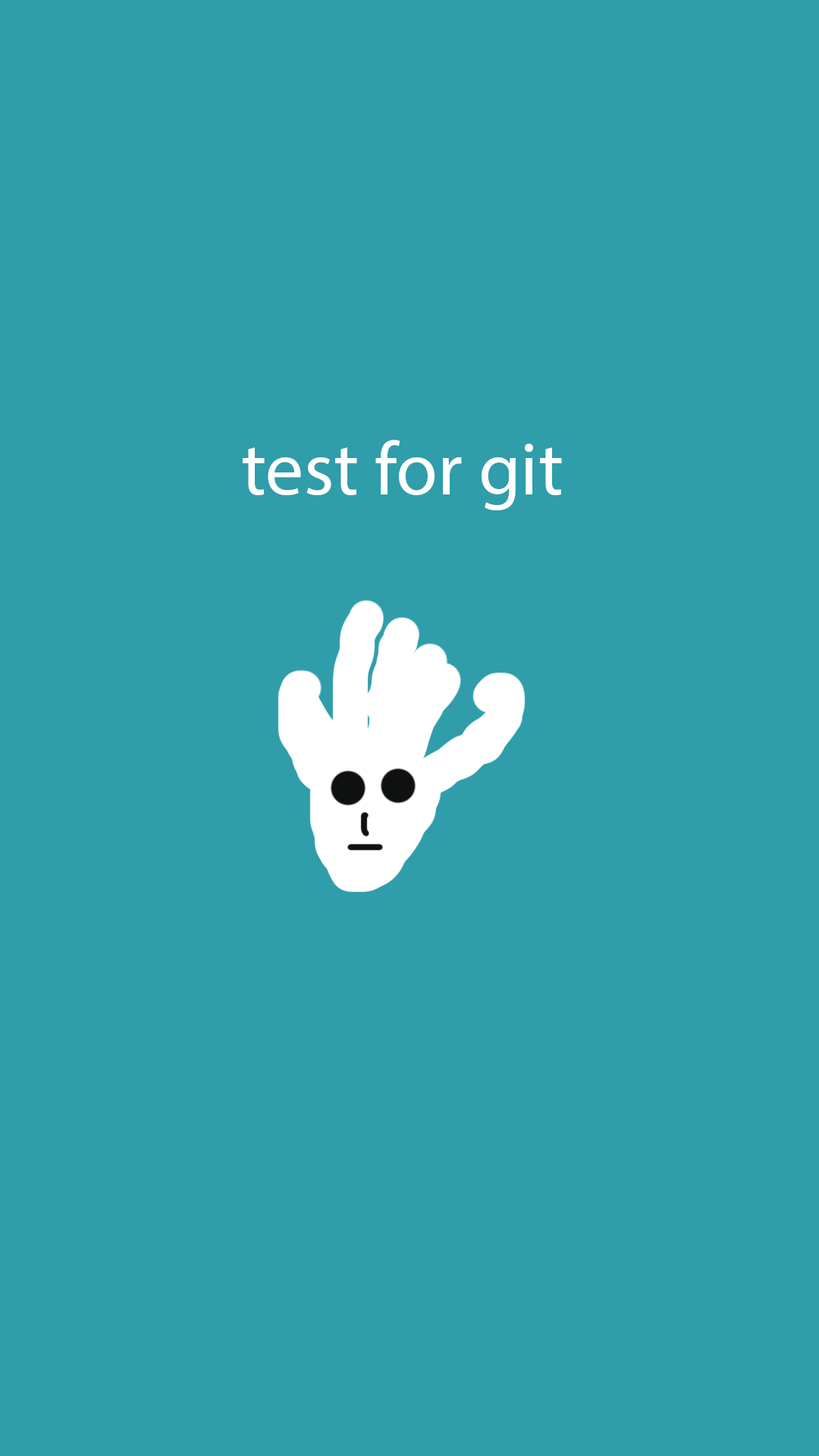
<style>
.page{position:relative;width:819px;height:1456px;background:#2f9daa}
.page>*{position:absolute;margin:0}
.t1{font:75.8px "MyriadPro-Regular";color:#ffffff}
</style>
<div class="page">
<p class="t1" style="left:243px;top:440px;width:319px;height:70px">test for git</p>
</div>
